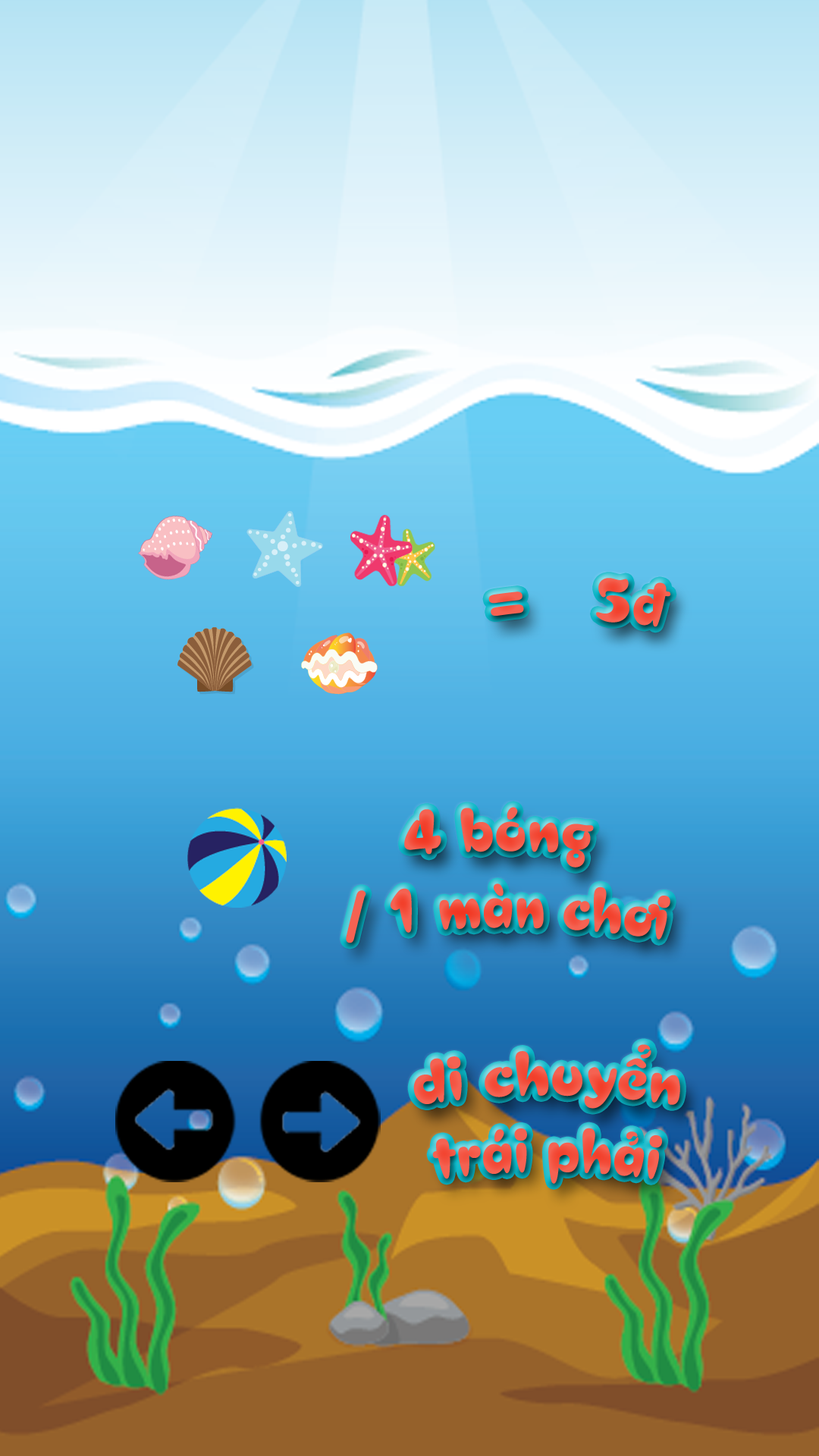
<style>
.page{position:relative;width:819px;height:1456px}
.page>*{position:absolute;margin:0}
.t1{font:63.7px "UVNBanhMi";color:#f45a48}
.t2{font:63.7px "UVNBanhMi";color:#f45846}
</style>
<div class="page">
<p class="t1" style="left:488px;top:578px;width:183px;height:49px">=    5đ</p>
<p class="t2" style="left:346px;top:807px;width:324px;height:136px;text-align:center">4 bóng <br>/ 1 màn chơi</p>
<p class="t1" style="left:413px;top:1044px;width:267px;height:140px;text-align:center">di chuyển<br>trái phải</p>
</div>
